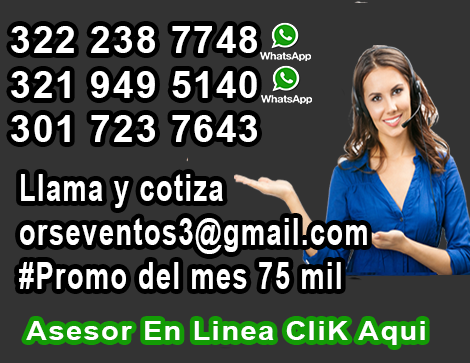
<style>
.page{position:relative;width:470px;height:363px;background:#333333}
.page>*{position:absolute;margin:0}
.t1{font:37.2px "Arial-BoldMT";letter-spacing:0.06em;color:#ffffff}
.t2{font:36.6px "Arial-BoldMT";letter-spacing:0.06em;color:#ffffff;scale:0.73 1}
.t3{font:25.9px "Arial-BoldMT";letter-spacing:0.06em;color:#ffffff;scale:1.1 1}
</style>
<div class="page">
<p class="t1" style="left:11px;top:26px;width:246px;height:116px">322 238 7748<br>321 949 5140<br>301 723 7643</p>
<p class="t2" style="left:19px;top:174px;width:348px;height:115px">Llama y cotiza<br>orseventos3@gmail.com<br>#Promo del mes 75 mil</p>
<p class="t3" style="left:26px;top:321px;width:399px;height:24px">Asesor En Linea CliK Aqui</p>
</div>
